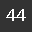
<style>
.page{position:relative;width:32px;height:32px;background:#333333}
.page>*{position:absolute;margin:0}
.t1{font:17.8px "MyriadPro-Regular";color:#ffffff;scale:1.12 1}
</style>
<div class="page">
<p class="t1" style="left:6px;top:9px;width:20px;height:12px">44</p>
</div>
